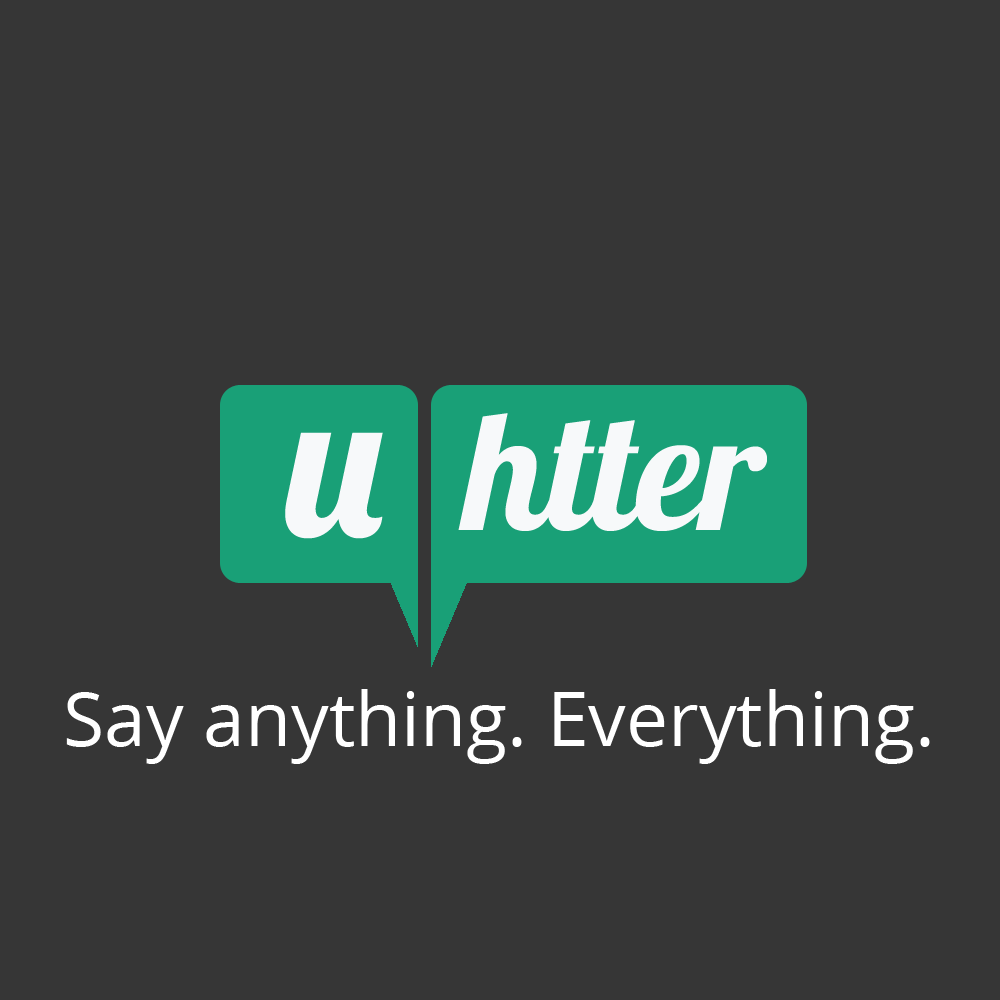
<style>
.page{position:relative;width:1000px;height:1000px;background:#363636}
.page>*{position:absolute;margin:0}
.t1{font:166.7px "Lobster1.4";color:#f7f9fa}
.t2{font:208.3px "Lobster1.4";color:#f7f9fa}
.t3{font:75px "OpenSans";color:#ffffff}
</style>
<div class="page">
<p class="t1" style="left:458px;top:413px;width:309px;height:118px">htter</p>
<p class="t2" style="left:285px;top:432px;width:98px;height:107px">u</p>
<p class="t3" style="left:66px;top:689px;width:864px;height:75px">Say anything. Everything.</p>
</div>
